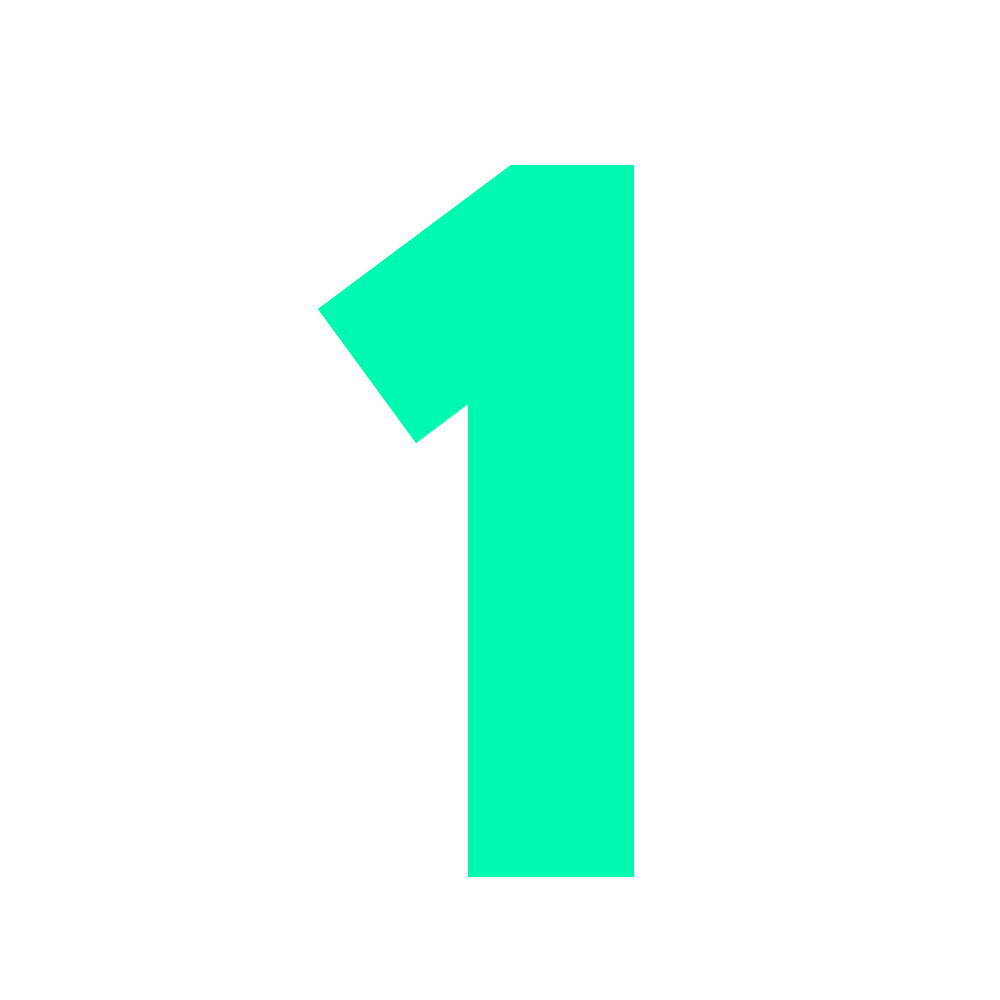
<style>
.page{position:relative;width:1000px;height:1000px;background:#ffffff}
.page>*{position:absolute;margin:0}
.t1{font:1000px "Biko-Black";color:#00f9b0}
</style>
<div class="page">
<p class="t1" style="left:318px;top:165px;width:316px;height:712px">1</p>
</div>
